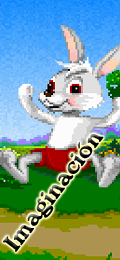
<style>
.page{position:relative;width:120px;height:260px}
.page>*{position:absolute;margin:0}
.t1{font:24px "WindsorBT-Roman"}
</style>
<div class="page">
<p class="t1" style="left:3px;top:134px;width:101px;height:118px;rotate:-53deg">Imaginación</p>
</div>
